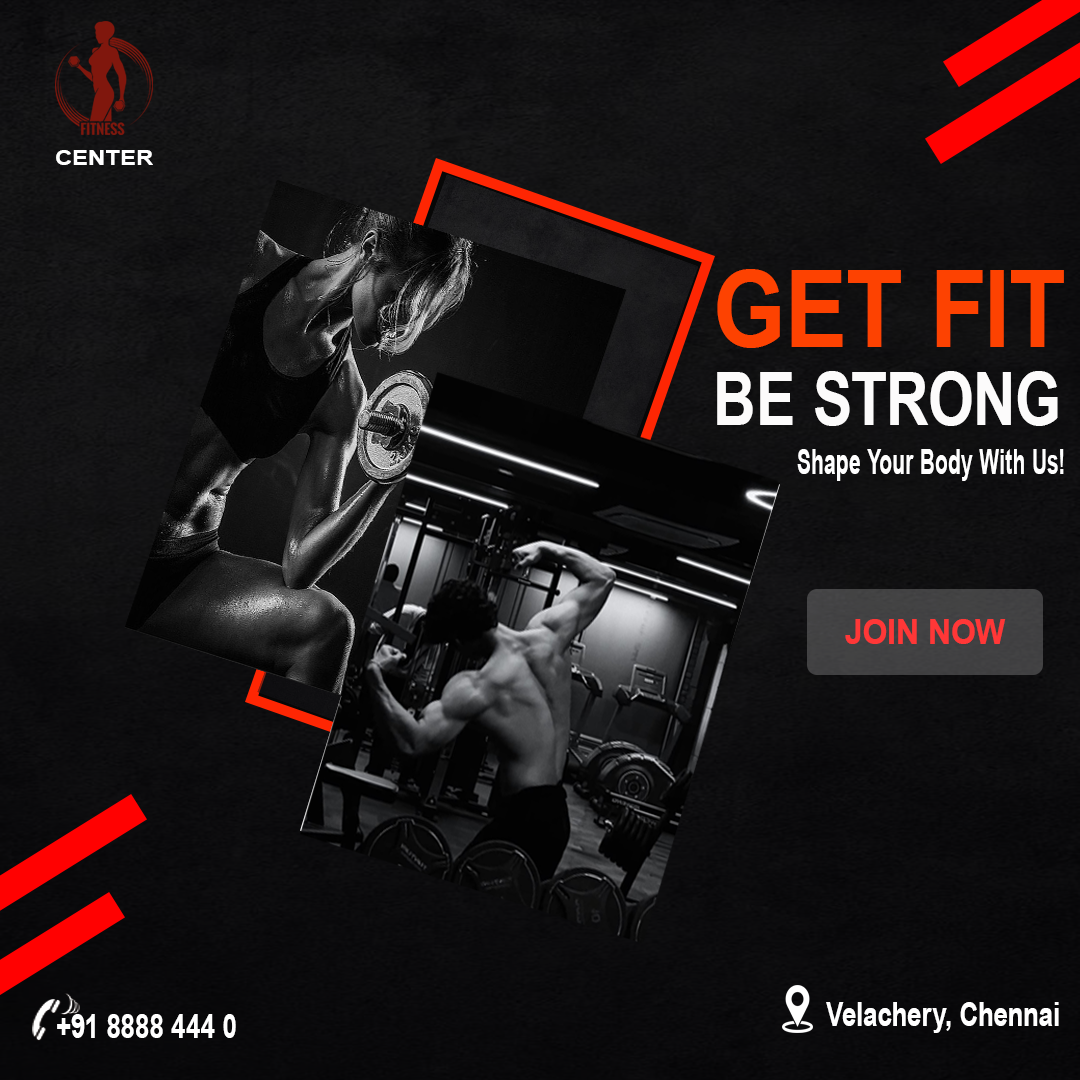
<style>
.page{position:relative;width:1080px;height:1080px}
.page>*{position:absolute;margin:0}
.t1{font:20.9px "Arial-BoldMT";letter-spacing:0.01em;color:#ffffff;scale:1.16 1}
.t2{font:107px "Arial-BoldMT";letter-spacing:0.01em;color:#fd4201;scale:0.87 1}
.t3{font:74.2px "Arial-BoldMT";letter-spacing:0.01em;color:#fcfbfb;scale:0.8 1}
.t4{font:35.1px "Arial-BoldMT";letter-spacing:0.01em;color:#ffffff;scale:0.61 1}
.t5{font:34.5px "Arial-BoldMT";letter-spacing:0.01em;color:#ff3737;scale:0.91 1}
.t6{font:32.5px "Arial-BoldMT";letter-spacing:0.01em;color:#ffffff;scale:0.79 1}
</style>
<div class="page">
<p class="t1" style="left:56px;top:150px;width:97px;height:15px">CENTER</p>
<p class="t2" style="left:717px;top:269px;width:347px;height:79px">GET FIT</p>
<p class="t3" style="left:717px;top:371px;width:341px;height:55px">BE STRONG</p>
<p class="t4" style="left:797px;top:449px;width:267px;height:32px">Shape Your Body With Us!</p>
<p class="t5" style="left:845px;top:619px;width:161px;height:25px">JOIN NOW</p>
<p class="t6" style="left:57px;top:1014px;width:179px;height:24px">+91 8888 444 0</p>
<p class="t6" style="left:826px;top:1002px;width:233px;height:31px">Velachery, Chennai</p>
</div>
